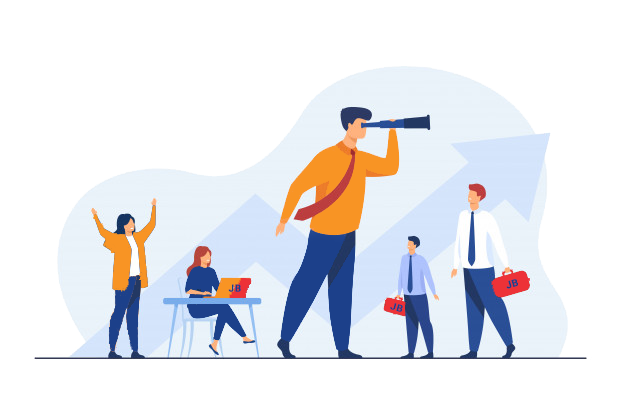
<style>
.page{position:relative;width:626px;height:417px;background:#ffffff}
.page>*{position:absolute;margin:0}
.t1{font:9.8px "Roboto-Bold";letter-spacing:0.05em;color:#1c408a;font-weight:bold}
</style>
<div class="page">
<p class="t1" style="left:506px;top:279px;width:12px;height:10px;rotate:-16deg">JB</p>
<p class="t1" style="left:228px;top:284px;width:13px;height:8px">JB</p>
<p class="t1" style="left:390px;top:303px;width:13px;height:9px;rotate:15deg">JB</p>
</div>
